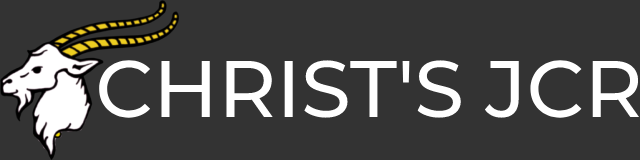
<style>
.page{position:relative;width:640px;height:160px;background:#333333}
.page>*{position:absolute;margin:0}
.t1{font:80px "Montserrat-Medium";color:#ffffff}
</style>
<div class="page">
<p class="t1" style="left:99px;top:60px;width:541px;height:58px">CHRIST'S JCR</p>
</div>
